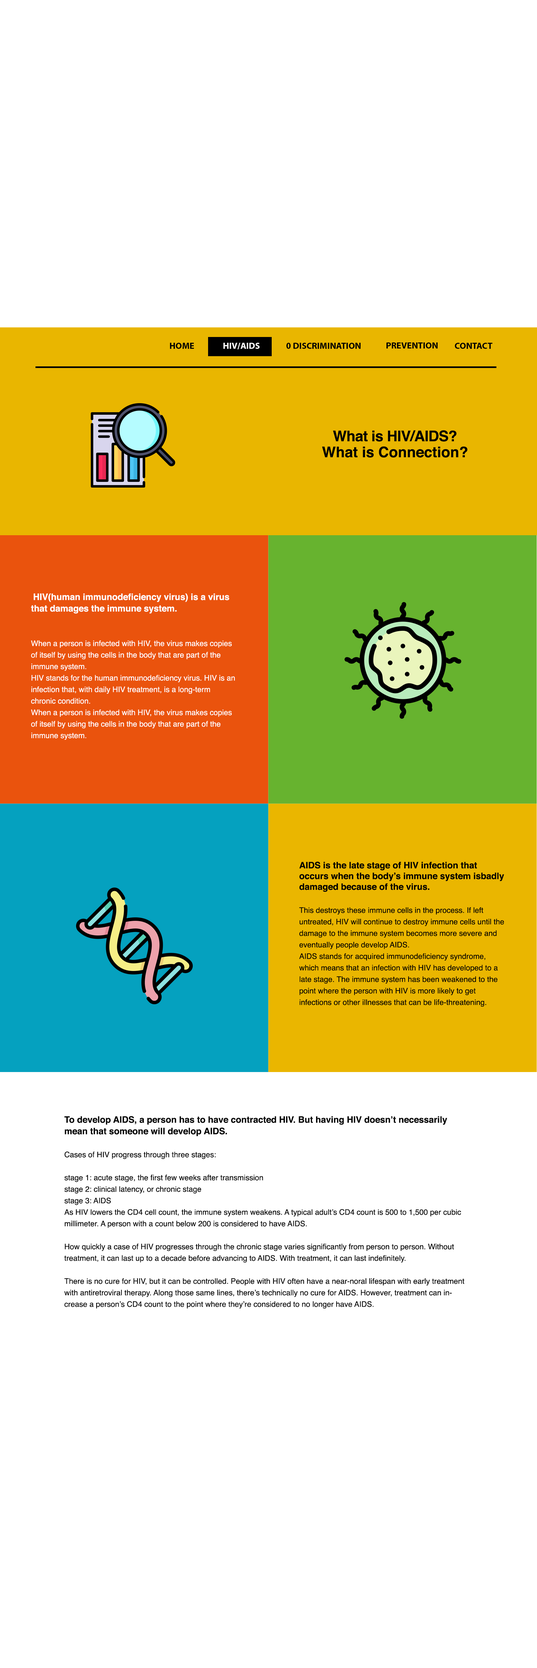
<style>
.page{position:relative;width:537px;height:1668px;background:#ffffff}
.page>*{position:absolute;margin:0}
.t1{font:9px "MyriadPro-Bold";color:#000000}
.t2{font:9px "MyriadPro-Bold";color:#ffffff}
.t3{font:14.7px/16px "Helvetica-Bold";color:#000000}
.t4{font:14.7px/11.5px "Helvetica-Bold";letter-spacing:-0.02em;color:#000000}
.t5{font:7.7px/11.5px "Helvetica";color:#ffffff}
.t6{font:7.7px "Helvetica";color:#ffffff}
.t7{font:9px/11.5px "Helvetica-Bold";color:#ffffff}
.t8{font:9px "Helvetica-Bold";color:#ffffff}
.t9{font:7.7px/11.5px "Helvetica";color:#000000}
.t10{font:9px "Helvetica-Bold";color:#000000}
.t11{font:9px/11.5px "Helvetica-Bold";color:#000000}
</style>
<div class="page">
<p class="t1" style="left:170px;top:343px;width:24px;height:6px">HOME</p>
<p class="t2" style="left:224px;top:343px;width:36px;height:7px">HIV/AIDS</p>
<p class="t1" style="left:287px;top:343px;width:74px;height:6px">0 DISCRIMINATION</p>
<p class="t1" style="left:387px;top:343px;width:51px;height:6px">PREVENTION</p>
<p class="t1" style="left:455px;top:343px;width:38px;height:6px">CONTACT</p>
<p class="t3" style="left:322px;top:430px;width:146px;height:28px;text-align:center"><span class="t4">What is HIV/AIDS?<br></span>What is Connection?</p>
<p class="t5" style="left:31px;top:594px;width:204px;height:146px;text-align:right"><span class="t6"> </span><span class="t7">HIV</span><span class="t8">(human immunodeficiency virus)</span><span class="t7"> is a virus that damages the immune system.   <br><br><br></span>When a person is infected with HIV, the virus makes copies of itself by using the cells in the body that are part of the immune system.<br>HIV stands for the human immunodeficiency virus. HIV is an infection that, with daily HIV treatment, is a long-term <br>chronic condition.<br>When a person is infected with HIV, the virus makes copies of itself by using the cells in the body that are part of the immune system.</p>
<p class="t9" style="left:299px;top:862px;width:205px;height:145px;text-align:right"><span class="t10">AIDS is the late stage of HIV infection that occurs when the body’s immune system isbadly damaged because of the virus.<br><br></span>This destroys these immune cells in the process. If left <br>untreated, HIV will continue to destroy immune cells until the damage to the immune system becomes more severe and eventually people develop AIDS. <br>AIDS stands for acquired immunodeficiency syndrome, which means that an infection with HIV has developed to a late stage. The immune system has been weakened to the point where the person with HIV is more likely to get <br>infections or other illnesses that can be life-threatening.</p>
<p class="t9" style="left:64px;top:1116px;width:401px;height:193px;text-align:right"><span class="t11">To develop AIDS, a person has to have contracted HIV. But having HIV doesn’t necessarily mean that someone will develop AIDS.<br></span><br>Cases of HIV progress through three stages:<br><br>stage 1: acute stage, the first few weeks after transmission<br>stage 2: clinical latency, or chronic stage<br>stage 3: AIDS<br>As HIV lowers the CD4 cell count, the immune system weakens. A typical adult’s CD4 count is 500 to 1,500 per cubic millimeter. A person with a count below 200 is considered to have AIDS.<br><br>How quickly a case of HIV progresses through the chronic stage varies significantly from person to person. Without treatment, it can last up to a decade before advancing to AIDS. With treatment, it can last indefinitely.<br><br>There is no cure for HIV, but it can be controlled. People with HIV often have a near-noral lifespan with early treatment with antiretroviral therapy. Along those same lines, there’s technically no cure for AIDS. However, treatment can increase a person’s CD4 count to the point where they’re considered to no longer have AIDS.</p>
</div>
